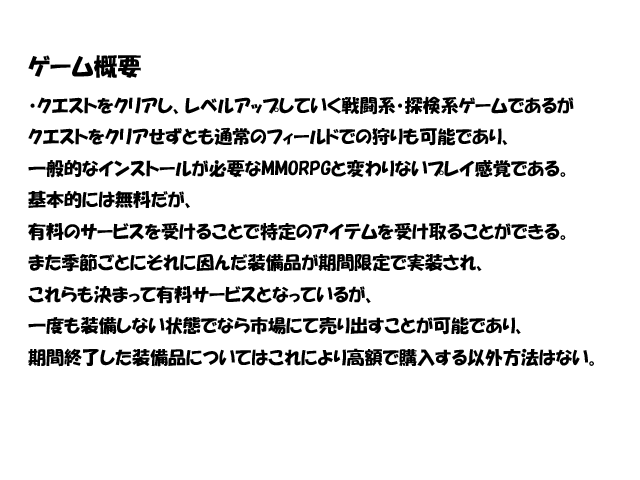
<style>
.page{position:relative;width:640px;height:480px;background:#ffffff}
.page>*{position:absolute;margin:0}
.t1{font:18px "HGPSoeiKakupoptai";color:#000000}
.t2{font:24px "HGPSoeiKakupoptai";color:#000000}
</style>
<div class="page">
<p class="t1" style="left:28px;top:55px;width:566px;height:312px"><span class="t2">ゲーム概要<br></span>・クエストをクリアし、レベルアップしていく戦闘系・探検系ゲームであるが<br>クエストをクリアせずとも通常のフィールドでの狩りも可能であり、<br>一般的なインストールが必要なMMORPGと変わりないプレイ感覚である。<br>基本的には無料だが、<br>有料のサービスを受けることで特定のアイテムを受け取ることができる。<br>また季節ごとにそれに因んだ装備品が期間限定で実装され、<br>これらも決まって有料サービスとなっているが、<br>一度も装備しない状態でなら市場にて売り出すことが可能であり、<br>期間終了した装備品についてはこれにより高額で購入する以外方法はない。</p>
</div>
